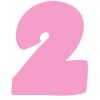
<style>
.page{position:relative;width:100px;height:100px;background:#f69eca}
.page>*{position:absolute;margin:0}
.t1{font:100px "akaDylanPlain";color:#f69eca}
</style>
<div class="page">
<p class="t1" style="left:11px;top:1px;width:77px;height:95px">2</p>
</div>
